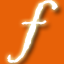
<style>
.page{position:relative;width:64px;height:64px;background:#e76108}
.page>*{position:absolute;margin:0}
.t1{font:72px "BlackadderITC-Regular";color:#ffffff}
</style>
<div class="page">
<p class="t1" style="left:7px;top:0px;width:51px;height:63px">f</p>
</div>
